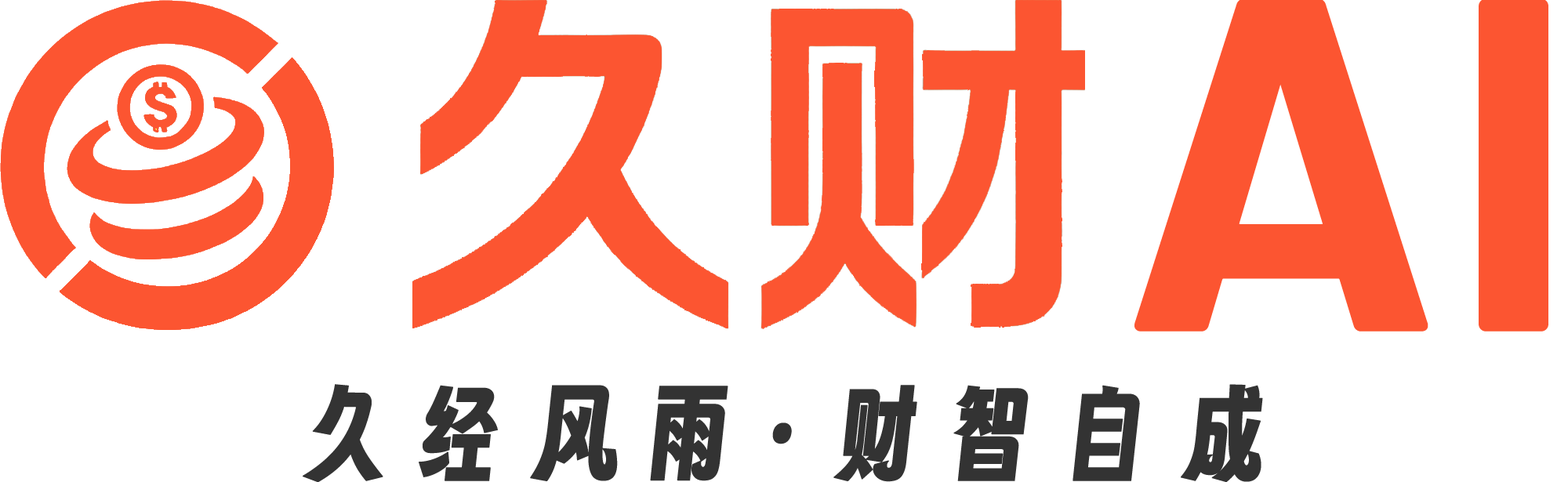
<style>
.page{position:relative;width:1568px;height:482px;background:#ffffff}
.page>*{position:absolute;margin:0}
.t1{font:470.4px "Barlow-Bold";color:#fc5531;font-weight:bold}
.t2{font:104.3px "zihunbiantaoti";letter-spacing:0.28em;color:#333333;font-weight:bold}
</style>
<div class="page">
<p class="t1" style="left:1134px;top:0px;width:414px;height:332px">AI</p>
<p class="t2" style="left:303px;top:384px;width:960px;height:99px">久经风雨·财智自成</p>
</div>
